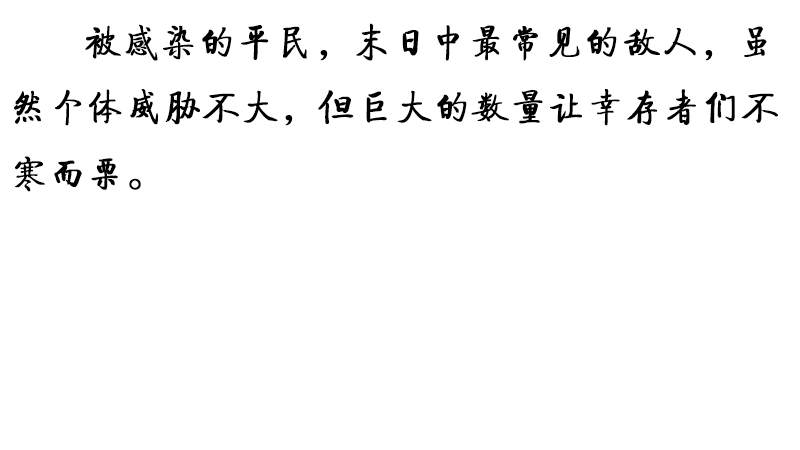
<style>
.page{position:relative;width:800px;height:450px;background:#ffffff}
.page>*{position:absolute;margin:0}
.t1{font:37.5px "JQiTi";color:#000000;font-weight:bold}
</style>
<div class="page">
<p class="t1" style="left:14px;top:23px;width:764px;height:169px">被感染的平民，末日中最常见的敌人，虽然个体威胁不大，但巨大的数量让幸存者们不寒而栗。</p>
</div>
